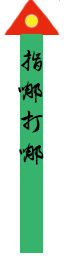
<style>
.page{position:relative;width:64px;height:256px;background:#ffffff}
.page>*{position:absolute;margin:0}
.t1{font:24px "lixukexingshu";color:#000000}
</style>
<div class="page">
<p class="t1" style="left:21px;top:50px;width:21px;height:22px">指</p>
<p class="t1" style="left:18px;top:81px;width:25px;height:22px">哪</p>
<p class="t1" style="left:20px;top:110px;width:23px;height:23px">打</p>
<p class="t1" style="left:19px;top:143px;width:25px;height:22px">哪</p>
</div>
